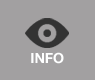
<style>
.page{position:relative;width:95px;height:80px;background:#a2a0a1}
.page>*{position:absolute;margin:0}
.t1{font:14px "HelveticaNeue-Bold";color:#feffff}
</style>
<div class="page">
<p class="t1" style="left:31px;top:52px;width:33px;height:12px">INFO</p>
</div>
